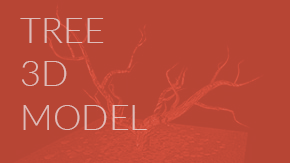
<style>
.page{position:relative;width:290px;height:163px;background:#b74534}
.page>*{position:absolute;margin:0}
.t1{font:36px "Lato-Light";color:#debcb9}
</style>
<div class="page">
<p class="t1" style="left:20px;top:18px;width:127px;height:112px">TREE<br>3D<br>MODEL</p>
</div>
